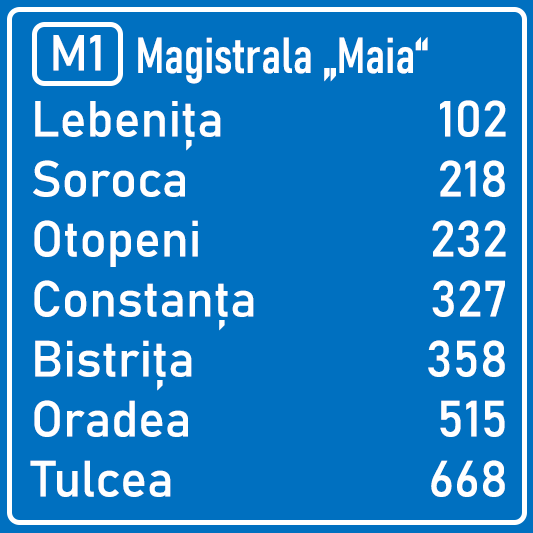
<style>
.page{position:relative;width:533px;height:533px;background:#0070c0}
.page>*{position:absolute;margin:0}
.t1{font:50px "Bahnschrift";color:#ffffff}
.t2{font:50px "Bahnschrift-Condensed";color:#ffffff}
</style>
<div class="page">
<p class="t1" style="left:53px;top:35px;width:48px;height:36px">M1</p>
<p class="t2" style="left:138px;top:37px;width:290px;height:47px">Magistrala „Maia“</p>
<p class="t1" style="left:30px;top:101px;width:224px;height:396px">Lebenița<br>Soroca<br>Otopeni<br>Constanța<br>Bistrița<br>Oradea<br>Tulcea</p>
<p class="t1" style="left:428px;top:100px;width:78px;height:397px;text-align:right">102<br>218<br>232<br>327<br>358<br>515<br>668</p>
</div>
